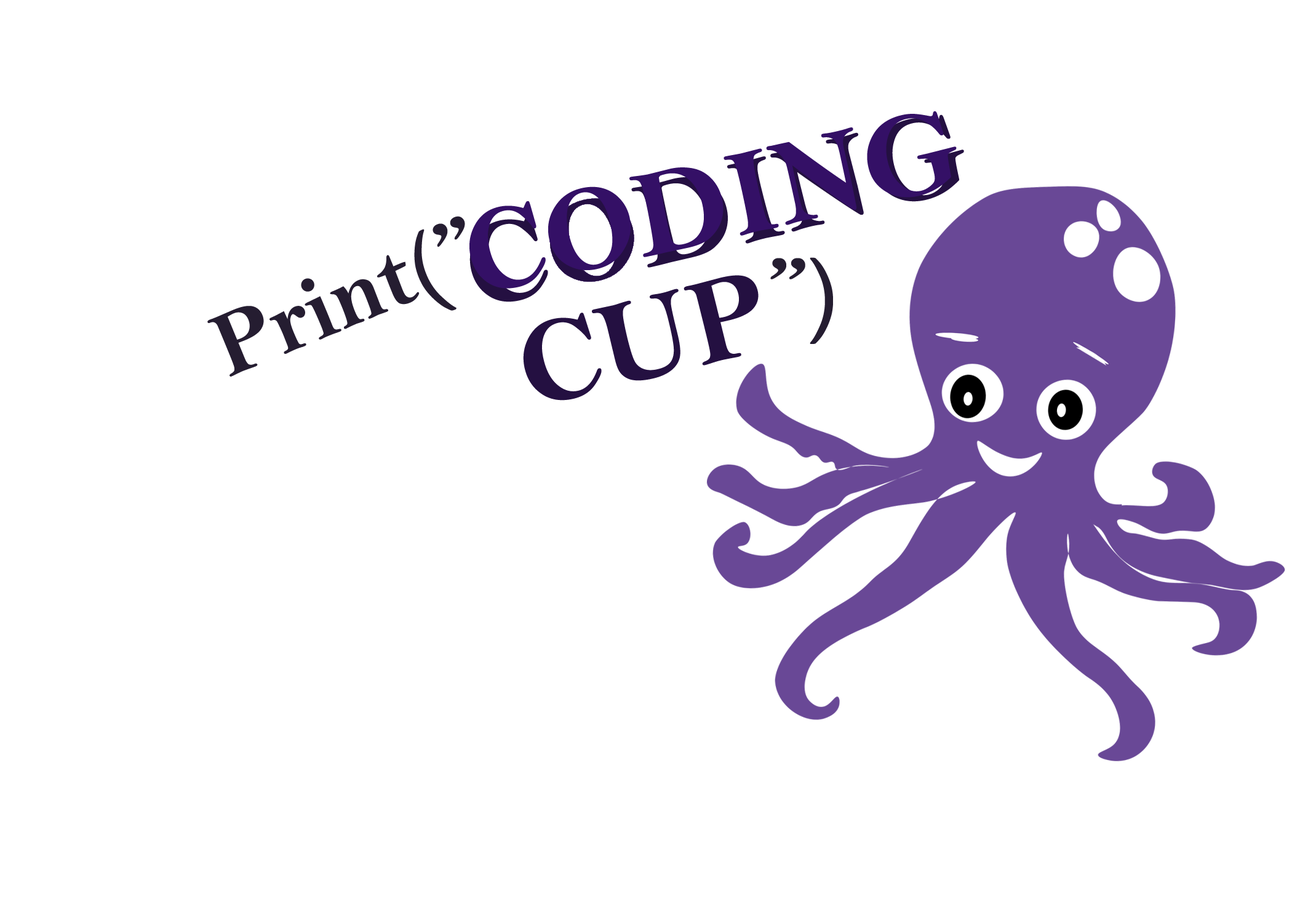
<style>
.page{position:relative;width:1292px;height:923px;background:#ffffff}
.page>*{position:absolute;margin:0}
.t1{font:123.3px "BellMTBold";color:#341066}
.t2{font:92.3px "BellMTBold";color:#251d31}
.t3{font:123.1px "BellMTBold";color:#241041}
</style>
<div class="page">
<p class="t1" style="left:469px;top:111px;width:488px;height:178px;rotate:-13deg">CODING</p>
<p class="t2" style="left:207px;top:216px;width:258px;height:161px;rotate:-22deg">Print(”</p>
<p class="t2" style="left:770px;top:257px;width:63px;height:87px">”)</p>
<p class="t3" style="left:523px;top:275px;width:236px;height:126px;rotate:-14deg">CUP</p>
</div>
